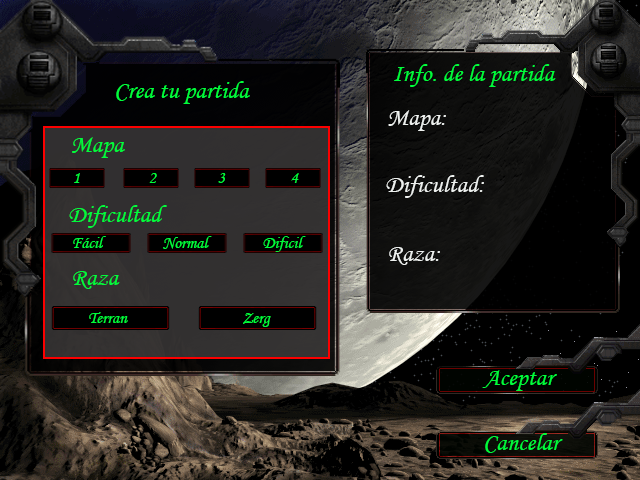
<style>
.page{position:relative;width:640px;height:480px}
.page>*{position:absolute;margin:0}
.t1{font:25px "MonotypeCorsiva";color:#00fc3b}
.t2{font:25px "MonotypeCorsiva";color:#eef1ef}
.t3{font:16.7px "MonotypeCorsiva";color:#00fc3b}
</style>
<div class="page">
<p class="t1" style="left:394px;top:64px;width:162px;height:23px">Info. de la partida</p>
<p class="t1" style="left:116px;top:81px;width:134px;height:23px">Crea tu partida</p>
<p class="t2" style="left:388px;top:110px;width:58px;height:21px">Mapa:</p>
<p class="t1" style="left:72px;top:137px;width:53px;height:21px">Mapa</p>
<p class="t3" style="left:74px;top:173px;width:6px;height:10px">1</p>
<p class="t3" style="left:149px;top:173px;width:8px;height:10px">2</p>
<p class="t3" style="left:218px;top:173px;width:8px;height:10px">3</p>
<p class="t3" style="left:291px;top:173px;width:8px;height:10px">4</p>
<p class="t2" style="left:386px;top:175px;width:98px;height:23px">Dificultad:</p>
<p class="t1" style="left:69px;top:205px;width:98px;height:23px">Dificultad</p>
<p class="t3" style="left:73px;top:236px;width:33px;height:12px">Fácil</p>
<p class="t3" style="left:163px;top:236px;width:49px;height:13px">Normal</p>
<p class="t3" style="left:263px;top:236px;width:43px;height:16px">Dificil</p>
<p class="t2" style="left:389px;top:247px;width:51px;height:18px">Raza:</p>
<p class="t1" style="left:73px;top:271px;width:47px;height:18px">Raza</p>
<p class="t3" style="left:89px;top:312px;width:39px;height:11px">Terran</p>
<p class="t3" style="left:243px;top:313px;width:28px;height:14px">Zerg</p>
<p class="t1" style="left:482px;top:370px;width:75px;height:21px">Aceptar</p>
<p class="t1" style="left:485px;top:433px;width:78px;height:20px">Cancelar</p>
</div>
